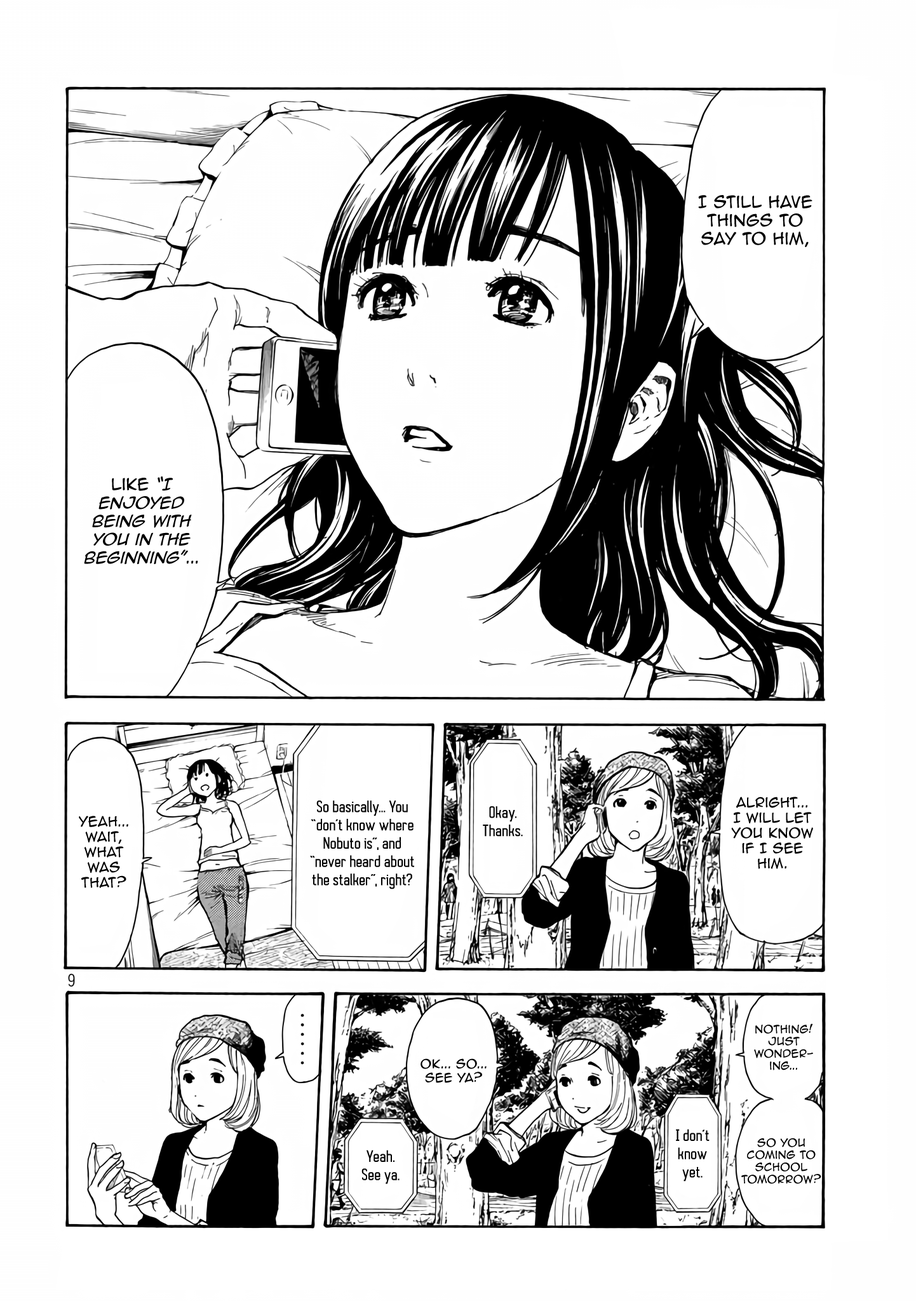
<style>
.page{position:relative;width:916px;height:1301px;background:#ffffff}
.page>*{position:absolute;margin:0}
.t1{font:15.3px "AnimeAce2.0BB";color:#000000}
.t2{font:15.3px "AnimeAce2.0BB-Italic";color:#000000}
.t3{font:12.7px "AnimeAce2.0BB";color:#000000}
.t4{font:15.3px "AutobusBold";color:#000000}
.t5{font:10.2px "AnimeAce2.0BB";color:#000000}
.t6{font:11.4px "AnimeAce2.0BB";color:#000000}
</style>
<div class="page">
<p class="t1" style="left:698px;top:195px;width:115px;height:52px;text-align:center">I still have things to say to him,</p>
<p class="t2" style="left:84px;top:477px;width:114px;height:87px;text-align:center"><span class="t1">like </span>“I enjoyed being with you in the beginning”<span class="t1">...</span></p>
<p class="t3" style="left:731px;top:797px;width:82px;height:72px;text-align:center">Alright... I will let you know if I see him.</p>
<p class="t4" style="left:310px;top:801px;width:104px;height:89px;text-align:center">So basically... You “don’t know where Nobuto is”, and “never heard about the stalker”, right?</p>
<p class="t4" style="left:483px;top:806px;width:40px;height:31px;text-align:center">Okay. Thanks.</p>
<p class="t3" style="left:79px;top:816px;width:49px;height:72px;text-align:center">Yeah... wait, what was that?</p>
<p class="t5" style="left:754px;top:1024px;width:59px;height:47px;text-align:center">Nothing! just wonder-<br>ing...</p>
<p class="t6" style="left:421px;top:1059px;width:66px;height:24px;text-align:center">Ok... So... see ya?</p>
<p class="t4" style="left:676px;top:1129px;width:34px;height:53px;text-align:center">I don’t know yet.</p>
<p class="t5" style="left:742px;top:1138px;width:80px;height:46px;text-align:center">So You coming to school tomorrow?</p>
<p class="t4" style="left:362px;top:1150px;width:38px;height:34px;text-align:center">Yeah. See ya.</p>
</div>
